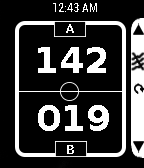
<style>
.page{position:relative;width:144px;height:168px;background:#000000}
.page>*{position:absolute;margin:0}
.t1{font:12px "Roboto-Condensed";color:#ffffff}
.t2{font:36px "DejaVuSans-Bold";color:#ffffff}
</style>
<div class="page">
<p class="t1" style="left:53px;top:3px;width:44px;height:9px">12:43 AM</p>
<p class="t2" style="left:38px;top:47px;width:68px;height:26px">142</p>
<p class="t2" style="left:38px;top:105px;width:71px;height:26px">019</p>
</div>
